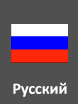
<style>
.page{position:relative;width:78px;height:104px;background:#505050}
.page>*{position:absolute;margin:0}
.t1{font:12px "Calibri-Bold";color:#ffffff}
</style>
<div class="page">
<p class="t1" style="left:13px;top:82px;width:54px;height:15px">Русский</p>
</div>
